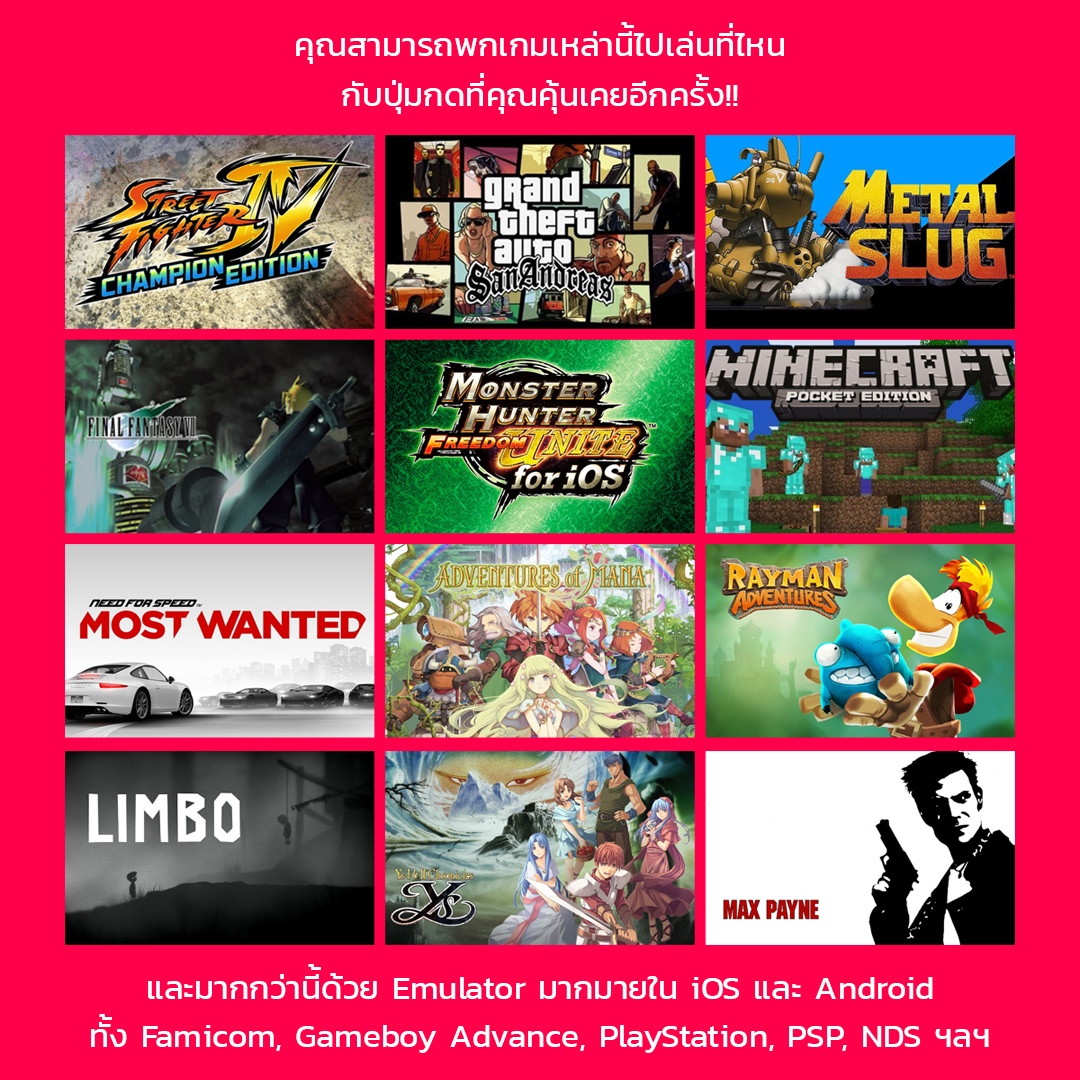
<style>
.page{position:relative;width:1080px;height:1080px;background:#ff004a}
.page>*{position:absolute;margin:0}
.t1{font:33.3px "Kanit-Regular";color:#ffffff}
</style>
<div class="page">
<p class="t1" style="left:621px;top:22px;width:13px;height:6px">้</p>
<p class="t1" style="left:729px;top:23px;width:4px;height:5px">่</p>
<p class="t1" style="left:296px;top:31px;width:488px;height:33px">คุณสามารถพกเกมเหล่านีไปเล่นทีไหน</p>
<p class="t1" style="left:480px;top:73px;width:4px;height:5px">่</p>
<p class="t1" style="left:696px;top:74px;width:13px;height:6px">้</p>
<p class="t1" style="left:342px;top:80px;width:396px;height:34px">กับปุมกดที่คุณคุ้นเคยอีกครัง!!</p>
<p class="t1" style="left:392px;top:80px;width:4px;height:5px">่</p>
<p class="t1" style="left:308px;top:964px;width:13px;height:6px">้</p>
<p class="t1" style="left:148px;top:973px;width:785px;height:26px">และมากกว่านีด้วย Emulator มากมายใน iOS และ Android</p>
<p class="t1" style="left:99px;top:1014px;width:13px;height:6px">้</p>
<p class="t1" style="left:91px;top:1022px;width:898px;height:31px">ทัง Famicom, Gameboy Advance, PlayStation, PSP, NDS ฯลฯ</p>
</div>
